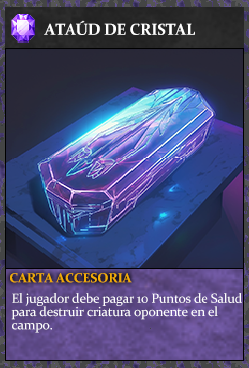
<style>
.page{position:relative;width:249px;height:368px}
.page>*{position:absolute;margin:0}
.t1{font:16px "Constantia-Bold";letter-spacing:-0.02em;color:#ffffff}
.t2{font:13.3px "Constantia-Bold";letter-spacing:-0.02em;color:#f2ac05}
.t3{font:13.3px/13.3px "Constantia";letter-spacing:-0.02em;color:#ffffff}
</style>
<div class="page">
<p class="t1" style="left:44px;top:20px;width:151px;height:15px">ATAÚD DE CRISTAL</p>
<p class="t2" style="left:10px;top:273px;width:122px;height:10px">CARTA ACCESORIA</p>
<p class="t3" style="left:11px;top:293px;width:231px;height:40px">El jugador debe pagar 10 Puntos de Salud<br>para destruir criatura oponente en el<br>campo.</p>
</div>
